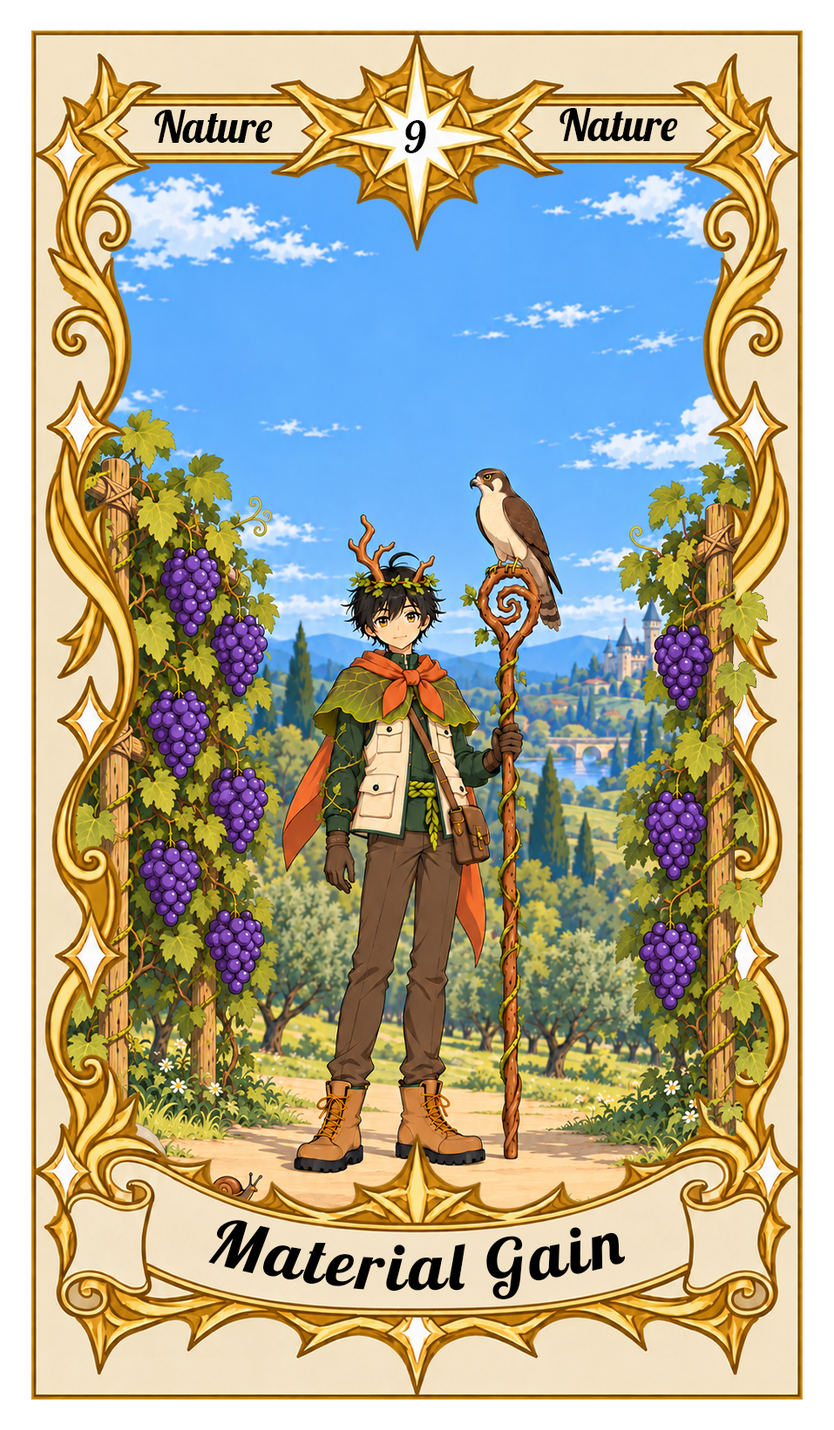
<style>
.page{position:relative;width:834px;height:1430px}
.page>*{position:absolute;margin:0}
.t1{font:43.6px "Lobster-Regular";color:#000000}
.t2{font:65.3px "Lobster-Regular";letter-spacing:0.05em;color:#000000}
</style>
<div class="page">
<p class="t1" style="left:154px;top:110px;width:119px;height:33px">Nature</p>
<p class="t1" style="left:559px;top:108px;width:119px;height:33px">Nature</p>
<p class="t1" style="left:404px;top:120px;width:22px;height:33px">9</p>
<p class="t2" style="left:208px;top:1220px;width:417px;height:80px">Material Gain</p>
</div>
